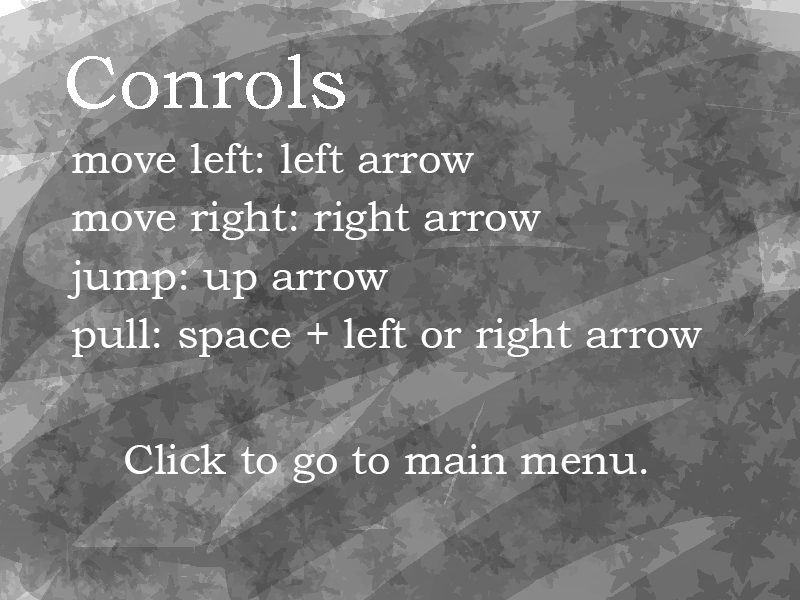
<style>
.page{position:relative;width:800px;height:600px}
.page>*{position:absolute;margin:0}
.t1{font:75px "BookmanOldStyle";color:#ffffff}
.t2{font:41.7px/58.3px "BookmanOldStyle";color:#ffffff}
.t3{font:41.7px "BookmanOldStyle";color:#ffffff}
</style>
<div class="page">
<p class="t1" style="left:67px;top:54px;width:278px;height:55px">Conrols</p>
<p class="t2" style="left:67px;top:143px;width:635px;height:214px">move left: left arrow <br>move right: right arrow<br>jump: up arrow<br>pull: space + left or right arrow</p>
<p class="t3" style="left:125px;top:444px;width:522px;height:39px">Click to go to main menu.</p>
</div>
